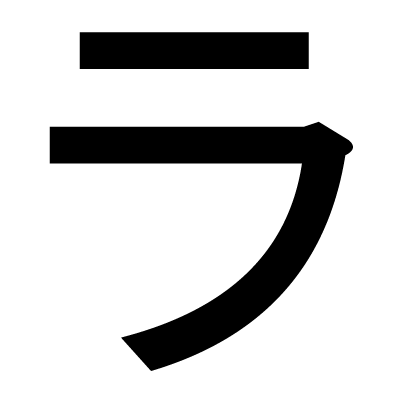
<style>
.page{position:relative;width:400px;height:400px;background:#ffffff}
.page>*{position:absolute;margin:0}
.t1{font:424.8px "MS-PGothic";color:#000000}
</style>
<div class="page">
<p class="t1" style="left:49px;top:32px;width:304px;height:339px">ラ</p>
</div>
